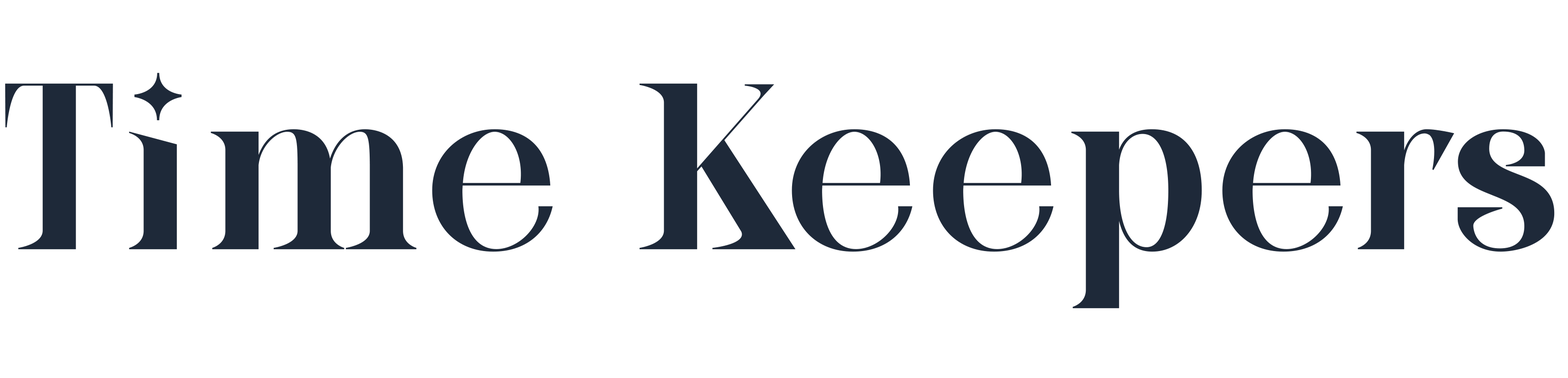
<style>
.page{position:relative;width:1568px;height:378px;background:#ffffff}
.page>*{position:absolute;margin:0}
.t1{font:234.9px "Magtis-ExtraBold";color:#1e2939;font-weight:bold}
</style>
<div class="page">
<p class="t1" style="left:5px;top:73px;width:1550px;height:235px">Time Keepers</p>
</div>
